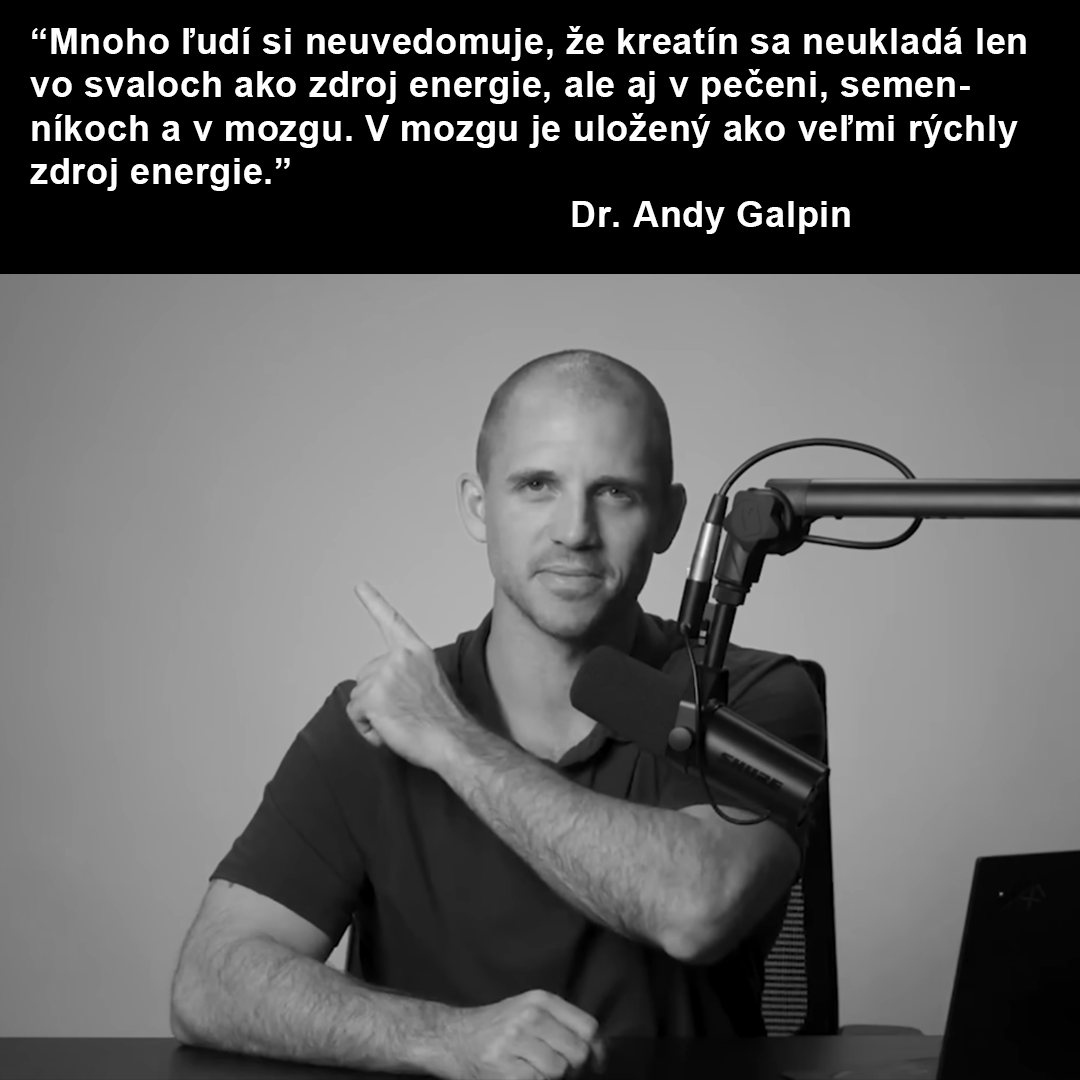
<style>
.page{position:relative;width:1080px;height:1080px;background:#000000}
.page>*{position:absolute;margin:0}
.t1{font:36px "Arial-BoldMT";letter-spacing:0.02em;color:#ffffff}
</style>
<div class="page">
<p class="t1" style="left:30px;top:26px;width:996px;height:208px">“Mnoho ľudí si neuvedomuje, že kreatín sa neukladá len vo svaloch ako zdroj energie, ale aj v pečeni, semenníkoch a v mozgu. V mozgu je uložený ako veľmi rýchly zdroj energie.”<br>               Dr. Andy Galpin</p>
</div>
